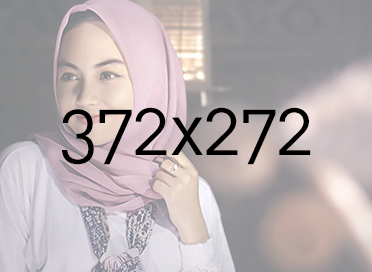
<style>
.page{position:relative;width:372px;height:272px}
.page>*{position:absolute;margin:0}
.t1{font:76px "DIN-RegularAlternate";letter-spacing:-0.025em;color:#000000}
</style>
<div class="page">
<p class="t1" style="left:62px;top:107px;width:249px;height:58px">372x272</p>
</div>
